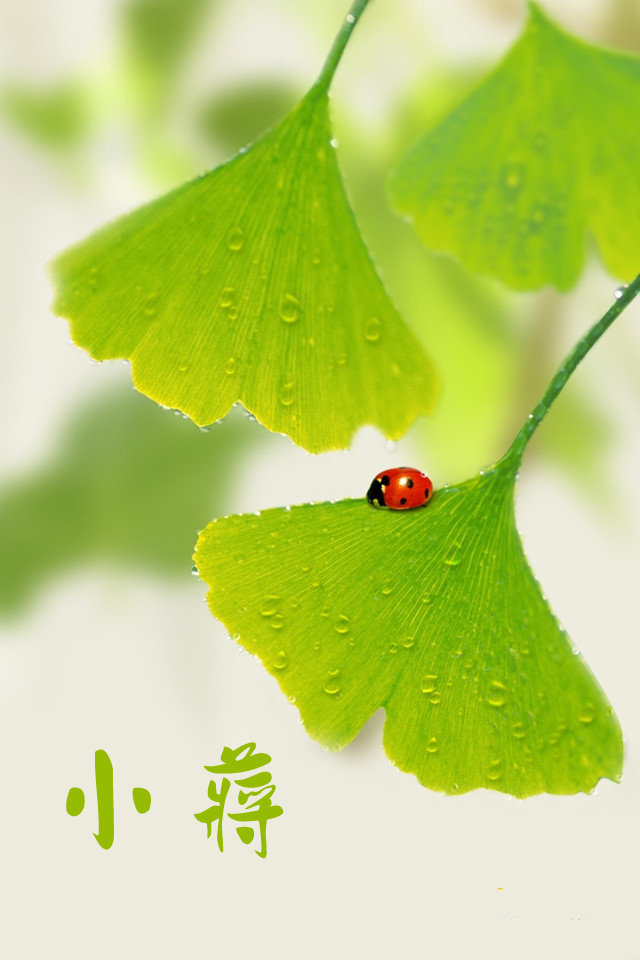
<style>
.page{position:relative;width:640px;height:960px;background:#edebde}
.page>*{position:absolute;margin:0}
.t1{font:133.3px "¾­µä·±ÖÐ±ä Regular";color:#95bb02}
</style>
<div class="page">
<p class="t1" style="left:66px;top:742px;width:218px;height:117px">小蒋</p>
</div>
